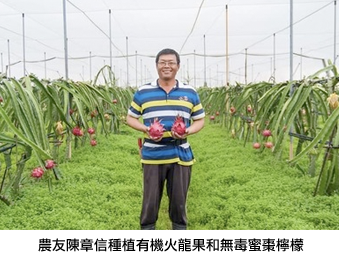
<style>
.page{position:relative;width:339px;height:267px}
.page>*{position:absolute;margin:0}
.t1{font:14px "LiHeiPro";color:#000000}
</style>
<div class="page">
<p class="t1" style="left:38px;top:238px;width:266px;height:14px">農友陳章信種植有機火龍果和無毒蜜棗檸檬</p>
</div>
